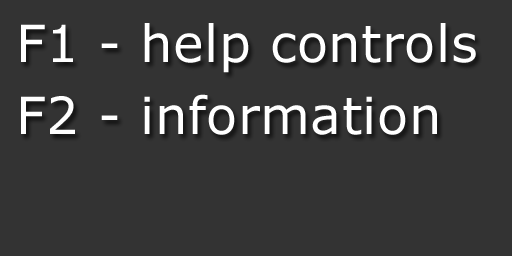
<style>
.page{position:relative;width:512px;height:256px;background:#333333}
.page>*{position:absolute;margin:0}
.t1{font:51.2px/71.3px "Verdana";letter-spacing:0.01em;color:#ffffff}
</style>
<div class="page">
<p class="t1" style="left:21px;top:23px;width:455px;height:112px">F1 - help controls<br>F2 - information</p>
</div>
